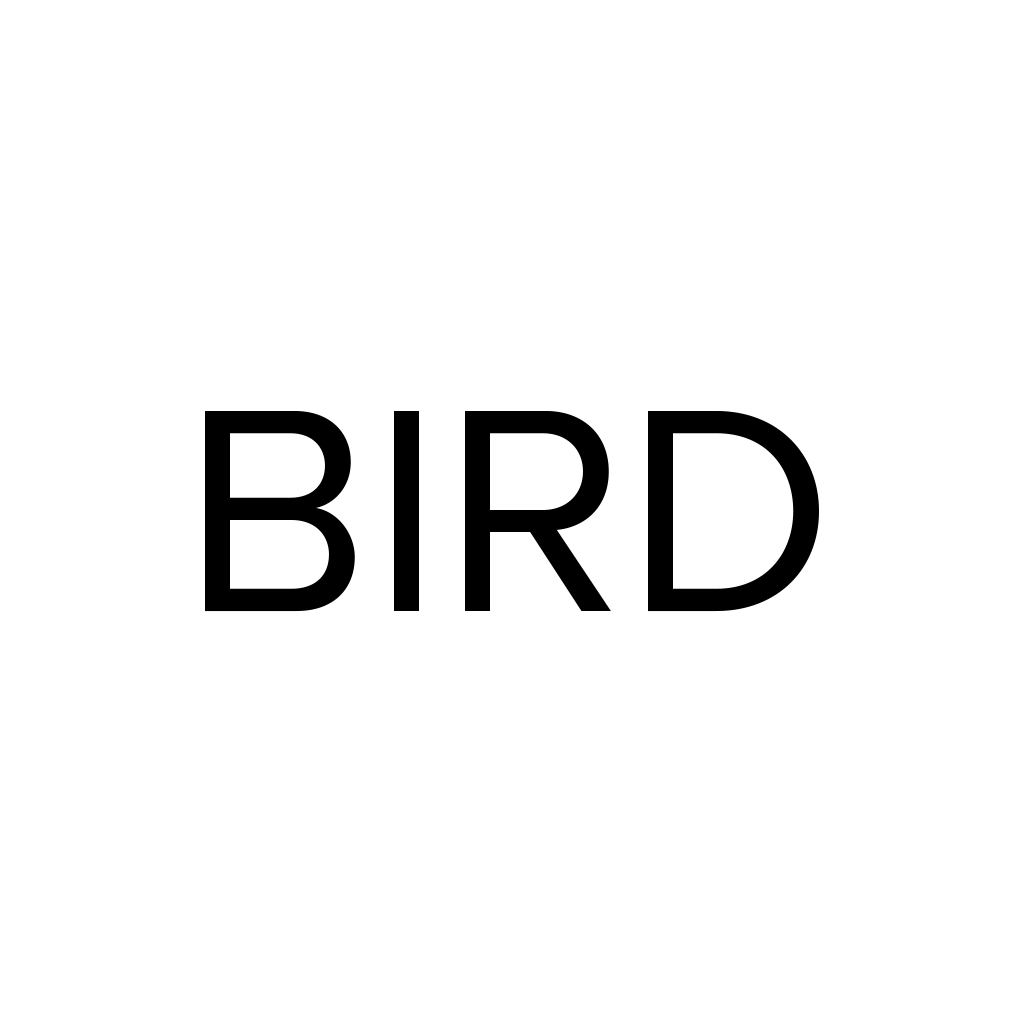
<style>
.page{position:relative;width:1024px;height:1024px;background:#ffffff}
.page>*{position:absolute;margin:0}
.t1{font:300px "ProximaNova-Regular";color:#000000}
</style>
<div class="page">
<p class="t1" style="left:205px;top:411px;width:614px;height:201px">BIRD</p>
</div>
